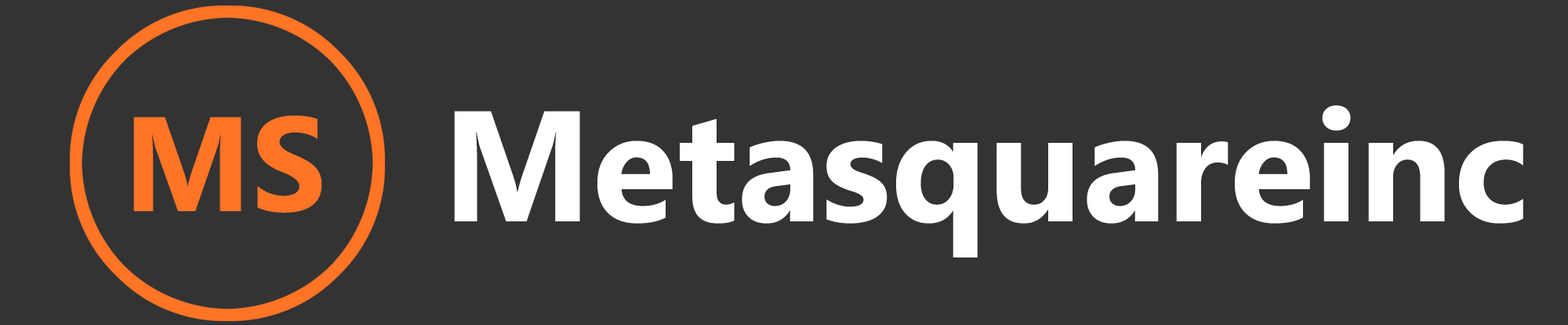
<style>
.page{position:relative;width:1568px;height:325px;background:#333333}
.page>*{position:absolute;margin:0}
.t1{font:156.8px "Ebrima-Bold";color:#ffffff}
.t2{font:133.8px "Ebrima-Bold";color:#ff7425}
</style>
<div class="page">
<p class="t1" style="left:454px;top:105px;width:1069px;height:152px">Metasquareinc</p>
<p class="t2" style="left:133px;top:115px;width:189px;height:97px">MS</p>
</div>
